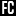
<style>
.page{position:relative;width:16px;height:16px;background:#000000}
.page>*{position:absolute;margin:0}
.t1{font:18.7px "Rajdhani-Bold";letter-spacing:-0.025em;color:#ffffff;scale:0.72 1}
</style>
<div class="page">
<p class="t1" style="left:2px;top:1px;width:12px;height:13px">FC</p>
</div>
